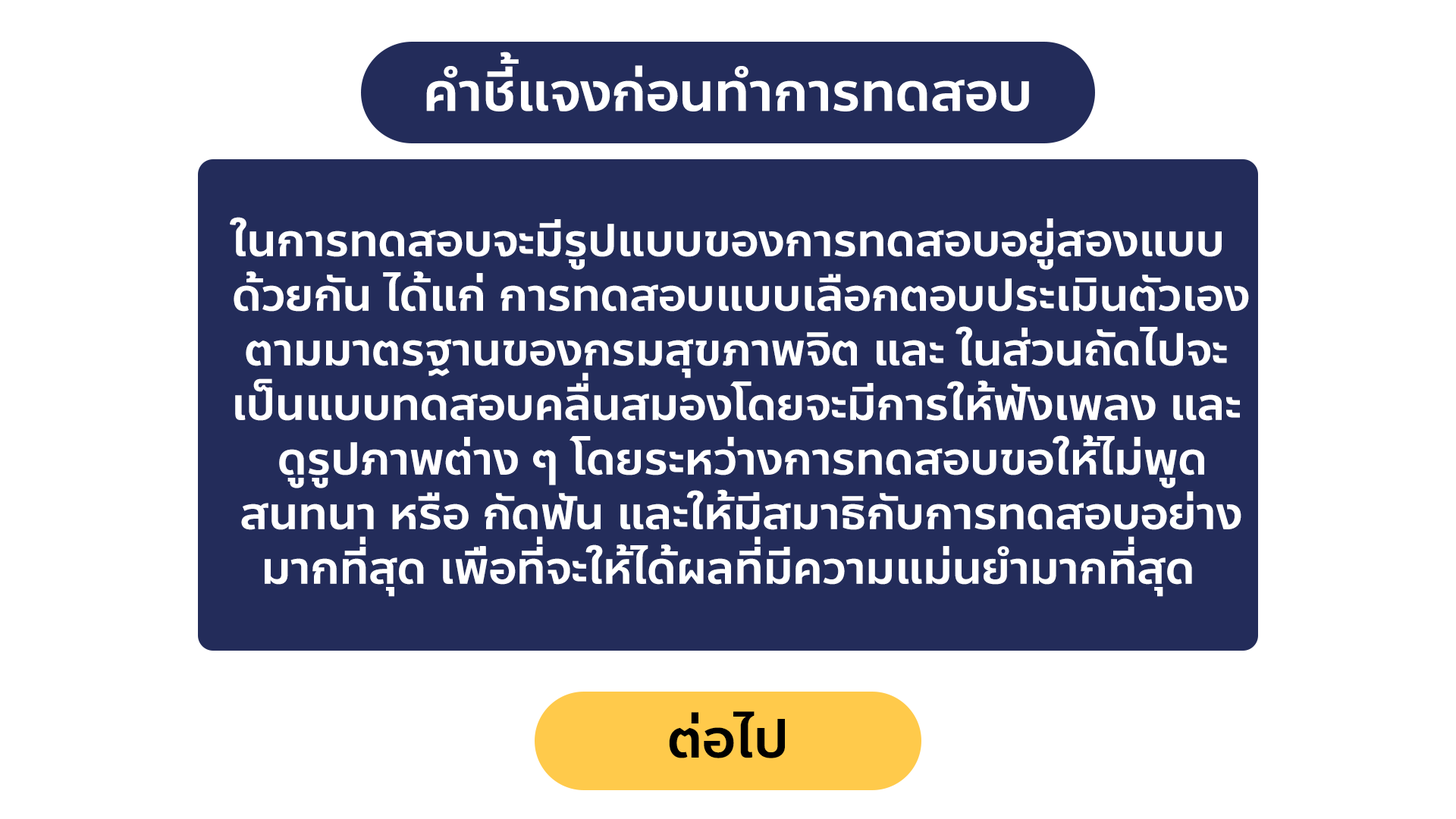
<style>
.page{position:relative;width:1456px;height:819px;background:#ffffff}
.page>*{position:absolute;margin:0}
.t1{font:54.6px "Anakotmai-Medium";color:#ffffff}
.t2{font:45.5px "Anakotmai-Medium";color:#ffffff}
.t3{font:54.6px "Anakotmai-Medium";color:#000000}
</style>
<div class="page">
<p class="t1" style="left:426px;top:52px;width:603px;height:59px">คำชี้แจงก่อนทำการทดสอบ</p>
<p class="t2" style="left:230px;top:217px;width:1019px;height:380px;text-align:center">ในการทดสอบจะมีรูปแบบของการทดสอบอยู่สองแบบ<br>ด้วยกัน ได้แก่ การทดสอบแบบเลือกตอบประเมินตัวเองตามมาตรฐานของกรมสุขภาพจิต และ ในส่วนถัดไปจะเป็นแบบทดสอบคลื่นสมองโดยจะมีการให้ฟังเพลง และดูรูปภาพต่าง ๆ โดยระหว่างการทดสอบขอให้ไม่พูดสนทนา หรือ กัดฟัน และให้มีสมาธิกับการทดสอบอย่างมากที่สุด เพื่อที่จะให้ได้ผลที่มีความแม่นยำมากที่สุด</p>
<p class="t3" style="left:669px;top:711px;width:116px;height:47px">ต่อไป</p>
</div>
